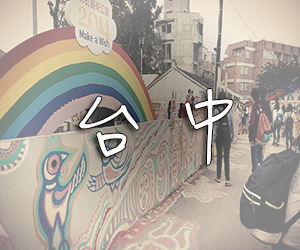
<style>
.page{position:relative;width:300px;height:250px}
.page>*{position:absolute;margin:0}
.t1{font:100px "DFHsiu-W3-WIN-BF";color:#fcfbfa}
</style>
<div class="page">
<p class="t1" style="left:79px;top:89px;width:154px;height:76px">台中</p>
</div>
